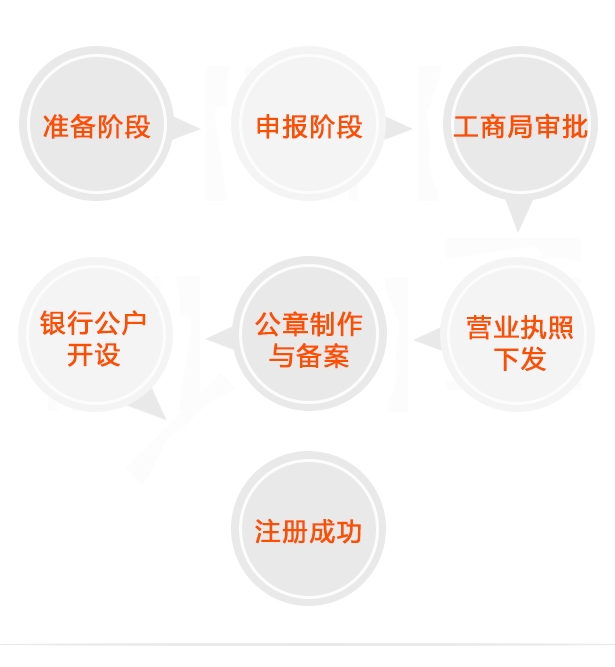
<style>
.page{position:relative;width:615px;height:667px;background:#ffffff}
.page>*{position:absolute;margin:0}
.t1{font:25px "MicrosoftYaHeiUI";letter-spacing:0.065em;color:#fd4f00;text-transform:uppercase;font-weight:bold}
.t2{font:24.9px/31.3px "MicrosoftYaHeiUI";letter-spacing:0.065em;color:#fd4f00;text-transform:uppercase;font-weight:bold}
.t3{font:25.2px/31.6px "MicrosoftYaHeiUI";letter-spacing:0.065em;color:#fd4f00;text-transform:uppercase;font-weight:bold}
.t4{font:25px/31.4px "MicrosoftYaHeiUI";letter-spacing:0.065em;color:#fd4f00;text-transform:uppercase;font-weight:bold}
</style>
<div class="page">
<p class="t1" style="left:43px;top:113px;width:108px;height:26px">准备阶段</p>
<p class="t1" style="left:453px;top:113px;width:135px;height:26px">工商局审批</p>
<p class="t1" style="left:257px;top:114px;width:106px;height:25px">申报阶段</p>
<p class="t2" style="left:40px;top:310px;width:106px;height:57px;text-align:center">银行公户<br>开设</p>
<p class="t3" style="left:255px;top:311px;width:108px;height:58px;text-align:center">公章制作<br>与备案</p>
<p class="t4" style="left:466px;top:315px;width:107px;height:56px;text-align:center">营业执照<br>下发</p>
<p class="t1" style="left:255px;top:518px;width:106px;height:26px">注册成功</p>
</div>
